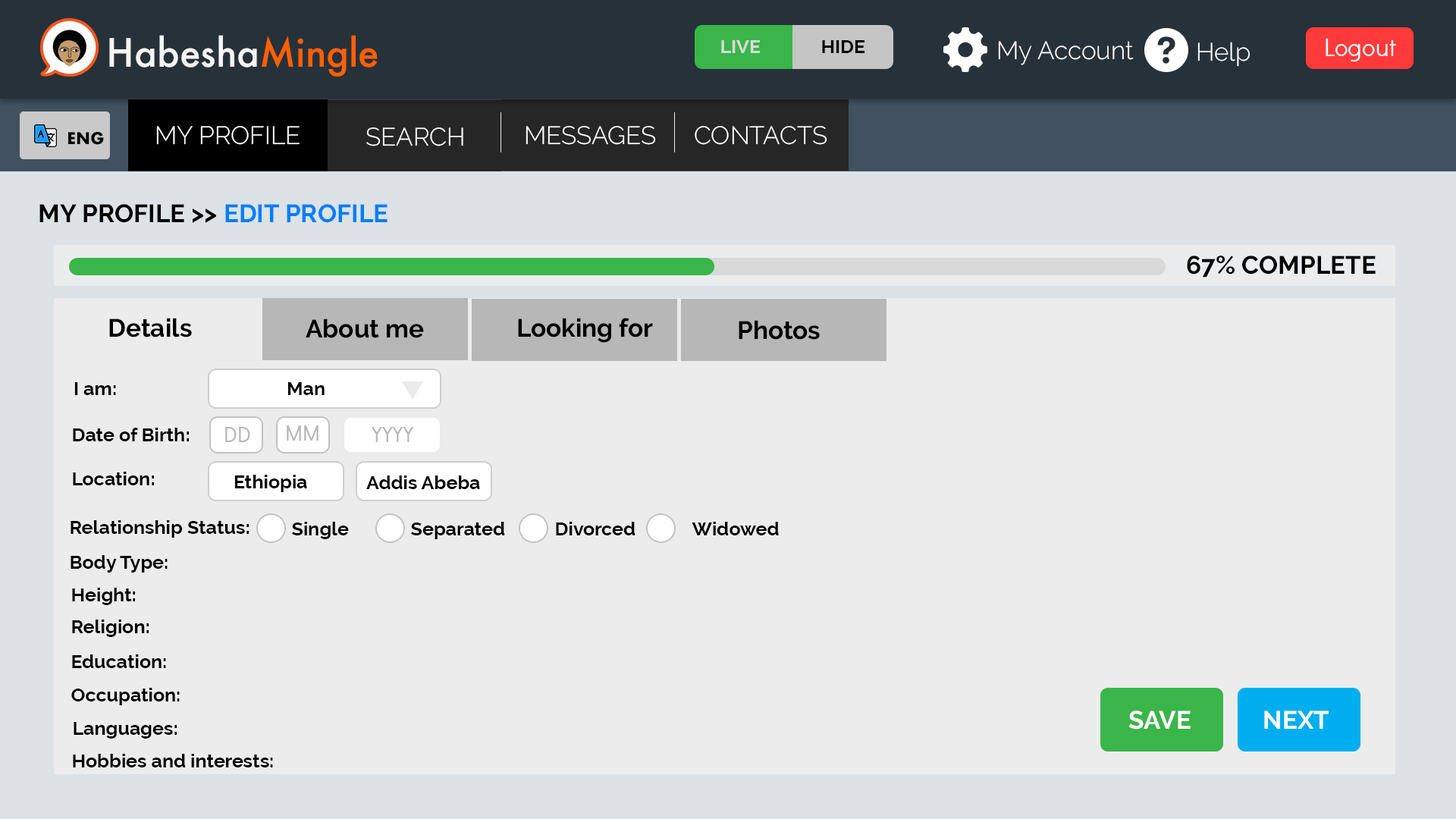
<style>
.page{position:relative;width:1456px;height:819px;background:#ececec}
.page>*{position:absolute;margin:0}
.t1{font:37.9px "Futura-Medium";color:#f5f5f5}
.t2{font:37.9px "Futura-Medium";color:#ff6000}
.t3{font:19px "Raleway-Bold";color:#d9d9d9}
.t4{font:19px "Raleway-Bold";color:#000000}
.t5{font:25.3px "Raleway-Light";color:#ffffff}
.t6{font:25.3px "DidactGothic";color:#ffffff}
.t7{font:25.3px "Raleway-Bold";color:#000000}
.t8{font:25.3px "Raleway-Bold";color:#007eff}
.t9{font:22.1px "DidactGothic";color:#b7b7b7}
.t10{font:25.3px "Raleway-Bold";color:#ffffff}
</style>
<div class="page">
<p class="t1" style="left:109px;top:35px;width:269px;height:42px">Habesha<span class="t2">Mingle</span></p>
<p class="t3" style="left:721px;top:40px;width:40px;height:13px">LIVE</p>
<p class="t4" style="left:822px;top:40px;width:43px;height:13px">HIDE</p>
<p class="t5" style="left:998px;top:41px;width:136px;height:24px">My Account</p>
<p class="t5" style="left:1197px;top:42px;width:53px;height:25px">Help</p>
<p class="t6" style="left:1326px;top:39px;width:70px;height:22px">Logout</p>
<p class="t5" style="left:156px;top:126px;width:144px;height:19px">MY PROFILE</p>
<p class="t5" style="left:526px;top:126px;width:130px;height:19px">MESSAGES</p>
<p class="t5" style="left:695px;top:126px;width:132px;height:19px">CONTACTS</p>
<p class="t5" style="left:366px;top:127px;width:97px;height:19px">SEARCH</p>
<p class="t7" style="left:39px;top:204px;width:349px;height:19px">MY PROFILE &gt;&gt; <span class="t8">EDIT PROFILE</span></p>
<p class="t7" style="left:1187px;top:256px;width:189px;height:22px">67% COMPLETE</p>
<p class="t7" style="left:109px;top:318px;width:83px;height:19px">Details</p>
<p class="t7" style="left:518px;top:318px;width:135px;height:25px">Looking for</p>
<p class="t7" style="left:306px;top:318px;width:118px;height:20px">About me</p>
<p class="t7" style="left:739px;top:320px;width:81px;height:20px">Photos</p>
<p class="t4" style="left:74px;top:382px;width:42px;height:13px">I am:</p>
<p class="t4" style="left:287px;top:382px;width:38px;height:13px">Man</p>
<p class="t9" style="left:287px;top:425px;width:31px;height:16px">MM</p>
<p class="t4" style="left:73px;top:428px;width:116px;height:13px">Date of Birth:</p>
<p class="t9" style="left:225px;top:427px;width:25px;height:15px">DD</p>
<p class="t9" style="left:372px;top:427px;width:42px;height:15px">YYYY</p>
<p class="t4" style="left:73px;top:472px;width:81px;height:13px">Location:</p>
<p class="t4" style="left:234px;top:475px;width:73px;height:17px">Ethiopia</p>
<p class="t4" style="left:366px;top:475px;width:114px;height:14px">Addis Abeba</p>
<p class="t4" style="left:71px;top:520px;width:178px;height:18px">Relationship Status:</p>
<p class="t4" style="left:292px;top:522px;width:57px;height:17px">Single</p>
<p class="t4" style="left:411px;top:522px;width:94px;height:17px">Separated</p>
<p class="t4" style="left:556px;top:522px;width:79px;height:13px">Divorced</p>
<p class="t4" style="left:692px;top:522px;width:87px;height:13px">Widowed</p>
<p class="t4" style="left:71px;top:555px;width:97px;height:18px">Body Type:</p>
<p class="t4" style="left:72px;top:588px;width:63px;height:17px">Height:</p>
<p class="t4" style="left:72px;top:620px;width:77px;height:17px">Religion:</p>
<p class="t4" style="left:72px;top:654px;width:94px;height:14px">Education:</p>
<p class="t4" style="left:71px;top:688px;width:109px;height:17px">Occupation:</p>
<p class="t10" style="left:1128px;top:711px;width:63px;height:19px">SAVE</p>
<p class="t10" style="left:1264px;top:711px;width:65px;height:18px">NEXT</p>
<p class="t4" style="left:74px;top:722px;width:103px;height:17px">Languages:</p>
<p class="t4" style="left:73px;top:754px;width:200px;height:13px">Hobbies and interests:</p>
</div>
